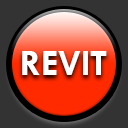
<style>
.page{position:relative;width:128px;height:128px;background:#333333}
.page>*{position:absolute;margin:0}
.t1{font:36px "TwCenMT-Bold";color:#ffffff}
</style>
<div class="page">
<p class="t1" style="left:22px;top:51px;width:85px;height:24px">REVIT</p>
</div>
